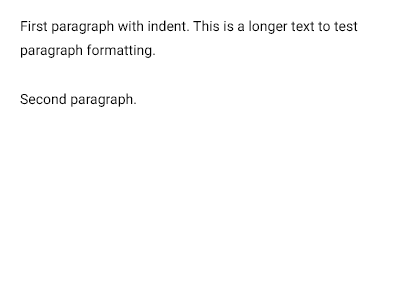
<style>
.page{position:relative;width:400px;height:300px;background:#ffffff}
.page>*{position:absolute;margin:0}
.t1{font:14px "Roboto-Regular";color:#000000}
</style>
<div class="page">
<p class="t1" style="left:20px;top:20px;width:338px;height:87px">First paragraph with indent. This is a longer text to test paragraph formatting.<br><br>Second paragraph.</p>
</div>
